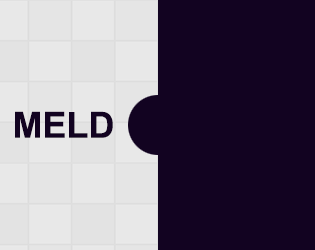
<style>
.page{position:relative;width:315px;height:250px;background:#120321}
.page>*{position:absolute;margin:0}
.t1{font:36px "Arial-BoldMT";color:#120321}
</style>
<div class="page">
<p class="t1" style="left:15px;top:111px;width:98px;height:27px">MELD</p>
</div>
